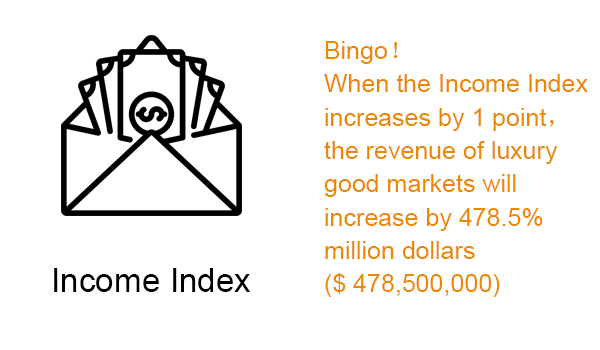
<style>
.page{position:relative;width:600px;height:350px;background:#ffffff}
.page>*{position:absolute;margin:0}
.t1{font:25px/33.3px "ArialMT";color:#ec8704}
.t2{font:25px/33.3px "SimSun";color:#ec8704}
.t3{font:12px/25px "ArialMT";color:#000000}
</style>
<div class="page">
<p class="t1" style="left:324px;top:41px;width:264px;height:256px">Bingo<span class="t2">！</span><br>When the Income Index <br>increases by 1 point<span class="t2">，</span><br>the revenue of luxury <br>good markets will <br>increase by 478.5%<br>million dollars<br>($ 478,500,000)</p>
<p class="t3" style="left:54px;top:268px;width:196px;height:24px">Income Index</p>
</div>
